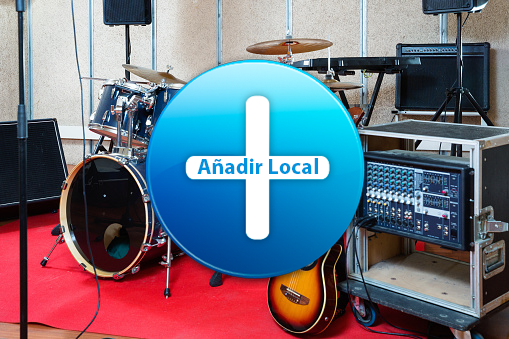
<style>
.page{position:relative;width:509px;height:339px}
.page>*{position:absolute;margin:0}
.t1{font:22.1px "MyriadPro-Bold";color:#0092dd}
</style>
<div class="page">
<p class="t1" style="left:197px;top:158px;width:121px;height:16px">Añadir Local</p>
</div>
